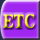
<style>
.page{position:relative;width:40px;height:40px;background:#a027ef}
.page>*{position:absolute;margin:0}
.t1{font:18px "MyungjoXB-HM"}
</style>
<div class="page">
<p class="t1" style="left:3px;top:14px;width:32px;height:14px">ETC</p>
</div>
